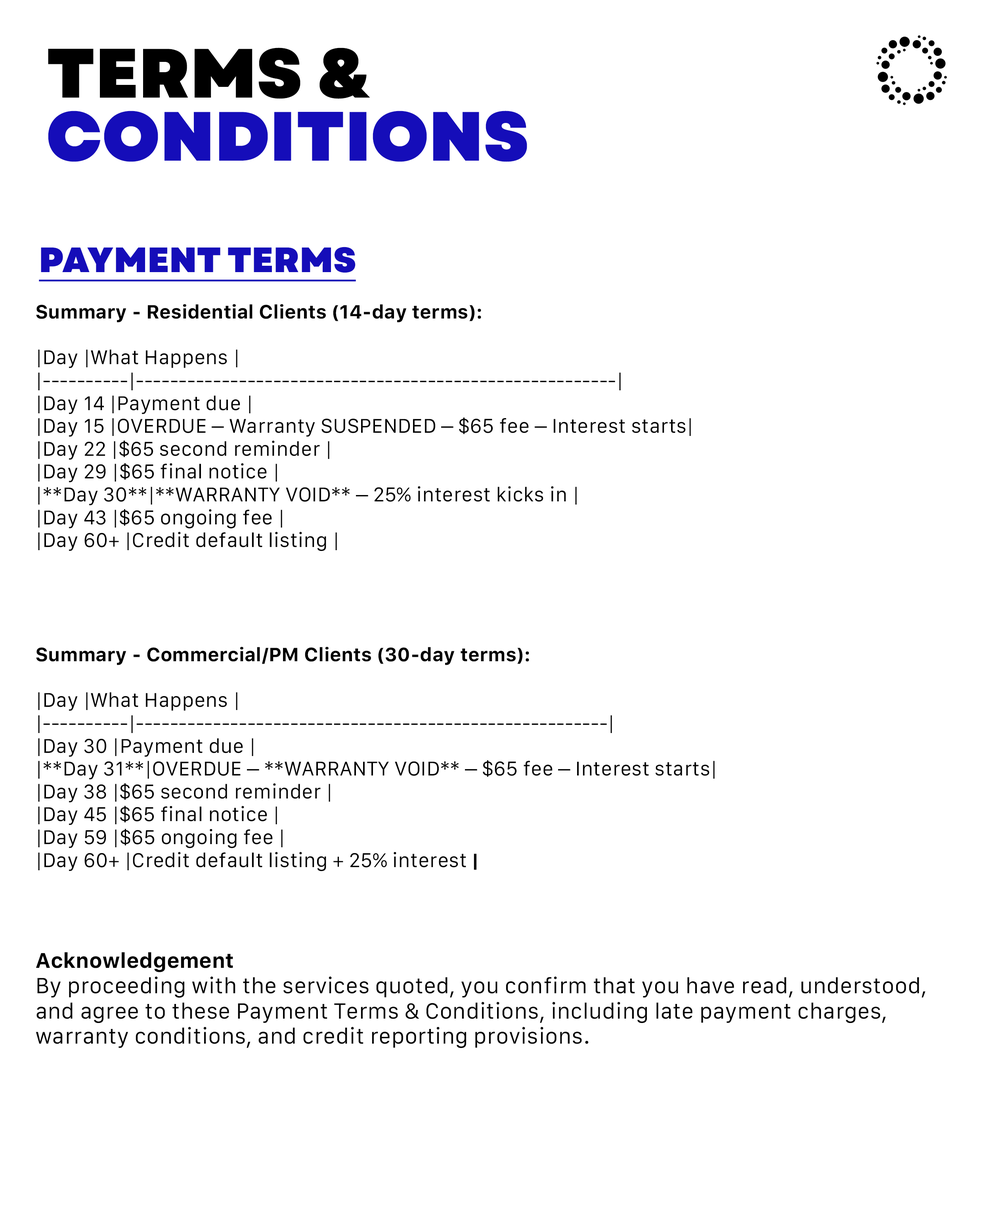
<style>
.page{position:relative;width:983px;height:1213px;background:#ffffff}
.page>*{position:absolute;margin:0}
.t1{font:69.5px/63.1px "Garet-Heavy";letter-spacing:0.005em;color:#150db9}
.t2{font:69.5px/63.1px "Garet-Heavy";letter-spacing:0.005em;color:#000000}
.t3{font:35.1px "Garet-Heavy";letter-spacing:0.005em;color:#150db9;text-decoration:underline}
.t4{font:19px "Galvji";letter-spacing:0.005em;color:#000000}
.t5{font:19px "Galvji-Bold";letter-spacing:0.005em;color:#000000}
.t6{font:21px "Galvji-Bold";letter-spacing:0.005em;color:#000000}
.t7{font:21px "Galvji";letter-spacing:0.005em;color:#000000}
</style>
<div class="page">
<p class="t1" style="left:48px;top:48px;width:479px;height:114px;text-align:justify"><span class="t2">TERMS &amp;<br></span>CONDITIONS</p>
<p class="t3" style="left:39px;top:247px;width:317px;height:35px">PAYMENT TERMS</p>
<p class="t4" style="left:36px;top:304px;width:890px;height:744px"><span class="t5">Summary - Residential Clients (14-day terms):<br><br></span>|Day |What Happens |<br>|----------|--------------------------------------------------------|<br>|Day 14 |Payment due |<br>|Day 15 |OVERDUE – Warranty SUSPENDED – $65 fee – Interest starts|<br>|Day 22 |$65 second reminder |<br>|Day 29 |$65 final notice |<br>|**Day 30**|**WARRANTY VOID** – 25% interest kicks in |<br>|Day 43 |$65 ongoing fee |<br>|Day 60+ |Credit default listing |<br><br><br><br><span class="t5"><br>Summary - Commercial/PM Clients (30-day terms):<br><br></span>|Day |What Happens |<br>|----------|-------------------------------------------------------|<br>|Day 30 |Payment due |<br>|**Day 31**|OVERDUE – **WARRANTY VOID** – $65 fee – Interest starts|<br>|Day 38 |$65 second reminder |<br>|Day 45 |$65 final notice |<br>|Day 59 |$65 ongoing fee |<br>|Day 60+ |Credit default listing + 25% interest <span class="t5">|<br></span><span class="t6"><br><br><br>Acknowledgement<br></span><span class="t7">By proceeding with the services quoted, you confirm that you have read, understood, and agree to these Payment Terms &amp; Conditions, including late payment charges, warranty conditions, and credit reporting provisions.</span></p>
</div>
